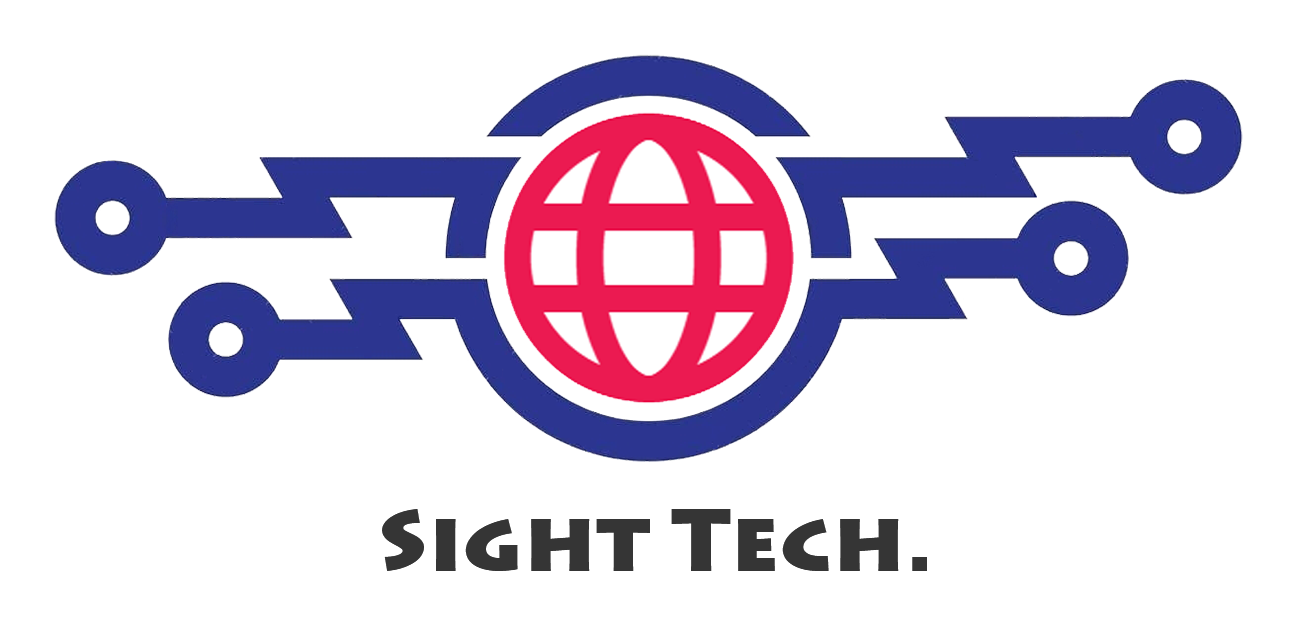
<style>
.page{position:relative;width:1291px;height:621px;background:#ffffff}
.page>*{position:absolute;margin:0}
.t1{font:88px "Lithos-Black";color:#353535}
</style>
<div class="page">
<p class="t1" style="left:382px;top:509px;width:545px;height:62px">Sight Tech.</p>
</div>
